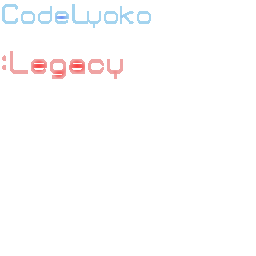
<style>
.page{position:relative;width:256px;height:256px;background:#ffffff}
.page>*{position:absolute;margin:0}
.t1{font:29.1px "01-DigitGraphics";color:#a4d4ef;scale:0.8 1}
.t2{font:33.6px "01-DigitGraphics";color:#efa4a4;scale:0.78 1}
</style>
<div class="page">
<p class="t1" style="left:2px;top:4px;width:149px;height:24px">CodeLyoko</p>
<p class="t2" style="left:2px;top:51px;width:121px;height:28px">:Legacy</p>
</div>
